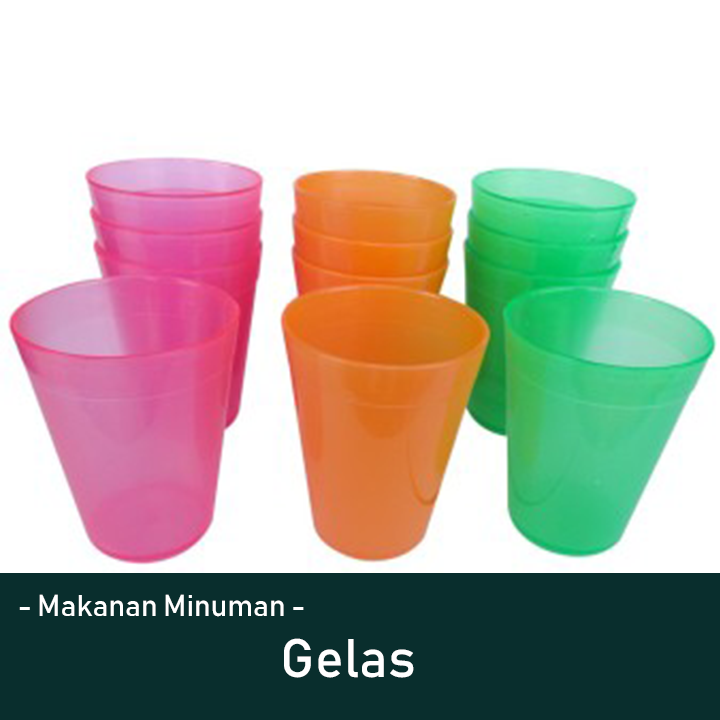
<style>
.page{position:relative;width:720px;height:720px;background:#ffffff}
.page>*{position:absolute;margin:0}
.t1{font:30px "Bahnschrift";color:#ffffff}
.t2{font:53.6px "Bahnschrift";color:#ffffff}
</style>
<div class="page">
<p class="t1" style="left:19px;top:594px;width:285px;height:23px">- Makanan Minuman -</p>
<p class="t2" style="left:284px;top:638px;width:130px;height:40px">Gelas</p>
</div>
